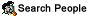
<style>
.page{position:relative;width:102px;height:16px;background:#ffffff}
.page>*{position:absolute;margin:0}
.t1{font:10px "ArialMT";color:#000000;font-weight:bold}
</style>
<div class="page">
<p class="t1" style="left:18px;top:4px;width:69px;height:10px">Search People</p>
</div>
